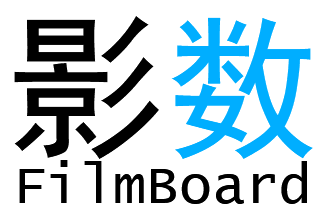
<style>
.page{position:relative;width:324px;height:212px;background:#ffffff}
.page>*{position:absolute;margin:0}
.t1{font:157px "SimHei";color:#000000}
.t2{font:157px "SimHei";color:#00aeff}
.t3{font:55px "LucidaConsole";color:#000000}
</style>
<div class="page">
<p class="t1" style="left:14px;top:16px;width:299px;height:143px">影<span class="t2">数</span></p>
<p class="t3" style="left:19px;top:160px;width:288px;height:44px">FilmBoard</p>
</div>
